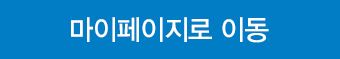
<style>
.page{position:relative;width:340px;height:59px;background:#007dc5}
.page>*{position:absolute;margin:0}
.t1{font:28px "YDVYGO33";letter-spacing:-0.025em;color:#ffffff;scale:0.95 1}
</style>
<div class="page">
<p class="t1" style="left:71px;top:17px;width:198px;height:26px">마이페이지로 이동</p>
</div>
